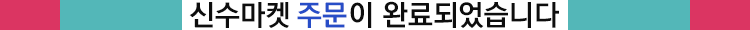
<style>
.page{position:relative;width:750px;height:30px;background:#53b7b8}
.page>*{position:absolute;margin:0}
.t1{font:29px "KoPubDotumBold";color:#0d0d0d}
.t2{font:29px "KoPubDotumBold";color:#274dc7}
</style>
<div class="page">
<p class="t1" style="left:189px;top:2px;width:100px;height:26px">신수마켓</p>
<p class="t2" style="left:297px;top:2px;width:50px;height:26px">주문</p>
<p class="t1" style="left:350px;top:1px;width:209px;height:27px">이 완료되었습니다</p>
</div>
